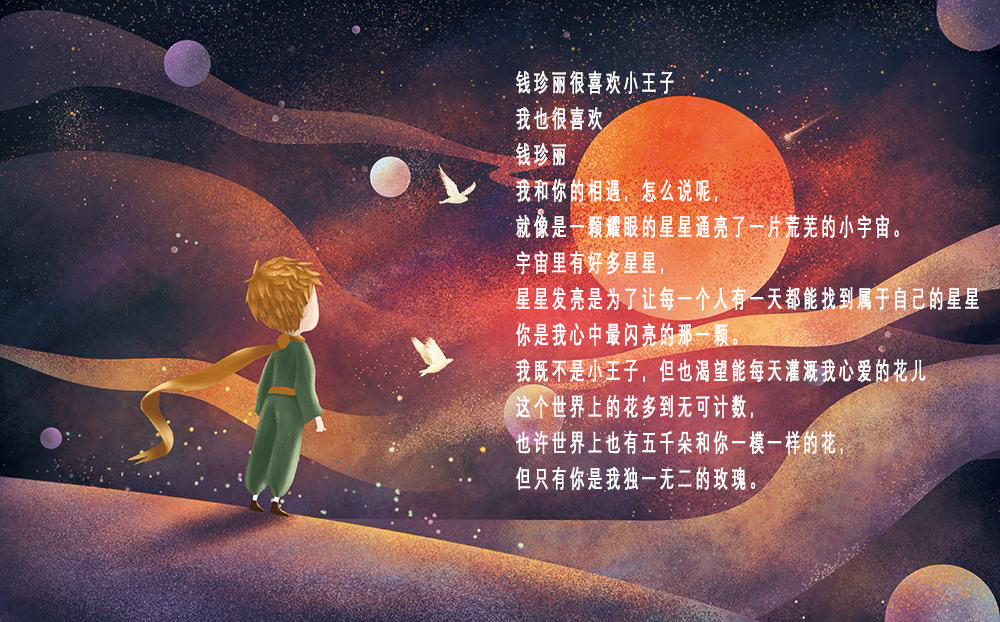
<style>
.page{position:relative;width:1000px;height:622px}
.page>*{position:absolute;margin:0}
.t1{font:24px/36px "DengXian";letter-spacing:0.22em;color:#ffffff;font-weight:bold;scale:0.6 1}
</style>
<div class="page">
<p class="t1" style="left:516px;top:70px;width:463px;height:420px">钱珍丽很喜欢小王子<br>我也很喜欢<br>钱珍丽<br>我和你的相遇，怎么说呢，<br>就像是一颗耀眼的星星通亮了一片荒芜的小宇宙。<br>宇宙里有好多星星，<br>星星发亮是为了让每一个人有一天都能找到属于自己的星星<br>你是我心中最闪亮的那一颗。<br>我既不是小王子，但也渴望能每天灌溉我心爱的花儿<br>这个世界上的花多到无可计数，<br>也许世界上也有五千朵和你一模一样的花，<br>但只有你是我独一无二的玫瑰。</p>
</div>
